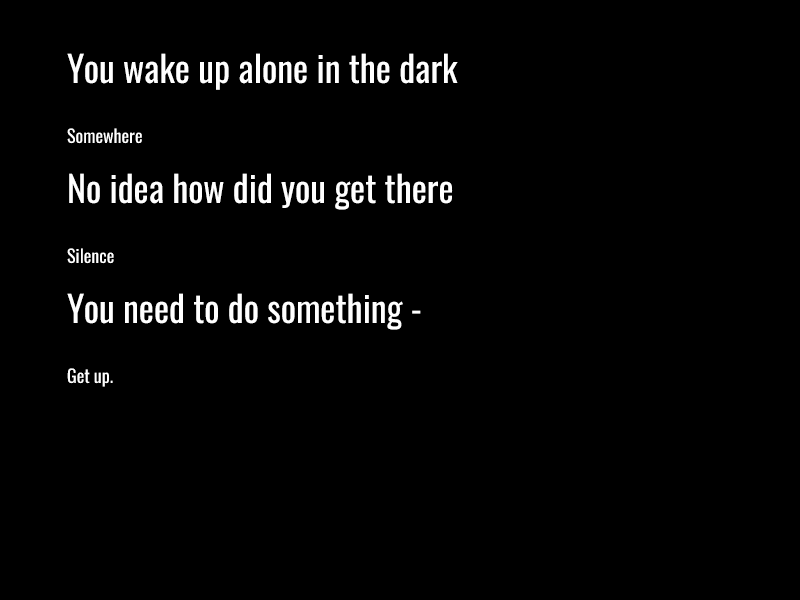
<style>
.page{position:relative;width:800px;height:600px;background:#000000}
.page>*{position:absolute;margin:0}
.t1{font:36px/60px "Oswald-Regular";color:#ffffff}
.t2{font:18px/60px "Oswald-Regular";color:#ffffff}
</style>
<div class="page">
<p class="t1" style="left:67px;top:53px;width:391px;height:334px">You wake up alone in the dark<br><span class="t2">Somewhere<br></span>No idea how did you get there<br><span class="t2">Silence<br></span>You need to do something - <br><span class="t2">Get up.</span></p>
</div>
